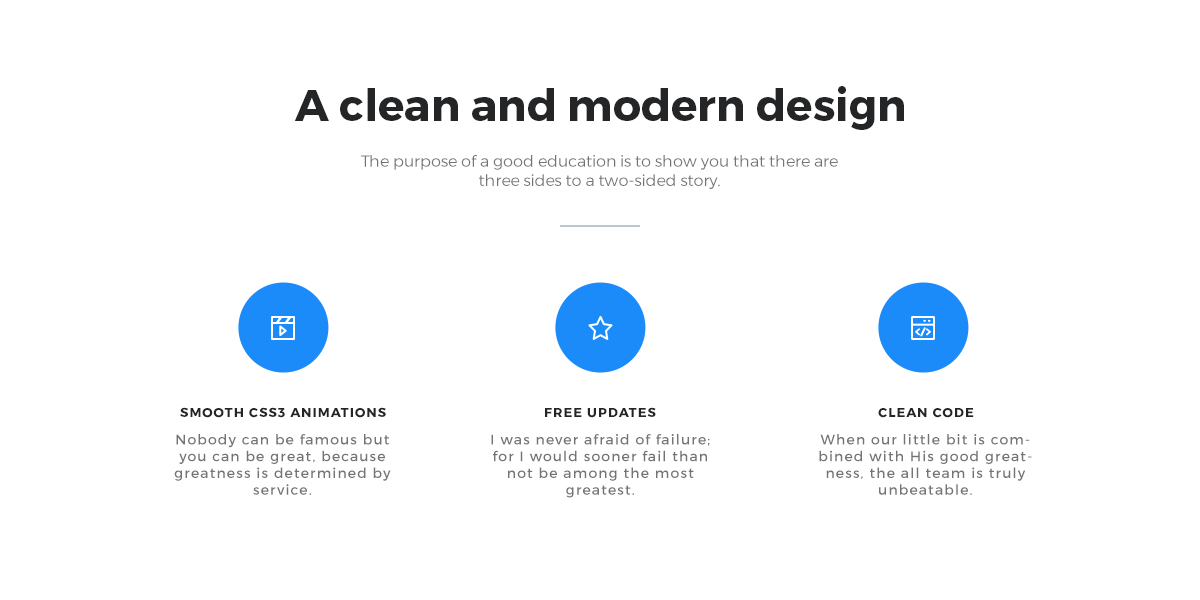
<style>
.page{position:relative;width:1200px;height:600px;background:#ffffff}
.page>*{position:absolute;margin:0}
.t1{font:44px "Montserrat-Bold";color:#242526}
.t2{font:16px "Montserrat-Light";color:#747474}
.t3{font:13px "Montserrat-Bold";letter-spacing:0.08em;color:#242526;text-transform:uppercase}
.t4{font:14px "Montserrat-Regular";letter-spacing:0.08em;color:#747474}
</style>
<div class="page">
<p class="t1" style="left:294px;top:86px;width:610px;height:44px">A clean and modern design</p>
<p class="t2" style="left:361px;top:155px;width:477px;height:34px;text-align:center">The purpose of a good education is to show you that there are three sides to a two-sided story.</p>
<p class="t3" style="left:180px;top:407px;width:206px;height:11px">Smooth css3 animations</p>
<p class="t3" style="left:545px;top:407px;width:111px;height:11px">free updates</p>
<p class="t3" style="left:878px;top:408px;width:96px;height:10px">Clean code</p>
<p class="t4" style="left:174px;top:434px;width:217px;height:61px;text-align:center">Nobody can be famous but you can be great, because greatness is determined by service.<br>Doing what needs to be done may not make you happy, but it will make you very great.</p>
<p class="t4" style="left:491px;top:434px;width:219px;height:64px;text-align:center">I was never afraid of failure; for I would sooner fail than not be among the most greatest.<br>Until you're finally ready to look foolish, you'll never have the possibility of being great.</p>
<p class="t4" style="left:819px;top:434px;width:213px;height:61px;text-align:center">When our little bit is combined with His good greatness, the all team is truly unbeatable.<br>All great spirits have always encountered violent opposition from mediocre cool minds.</p>
</div>
